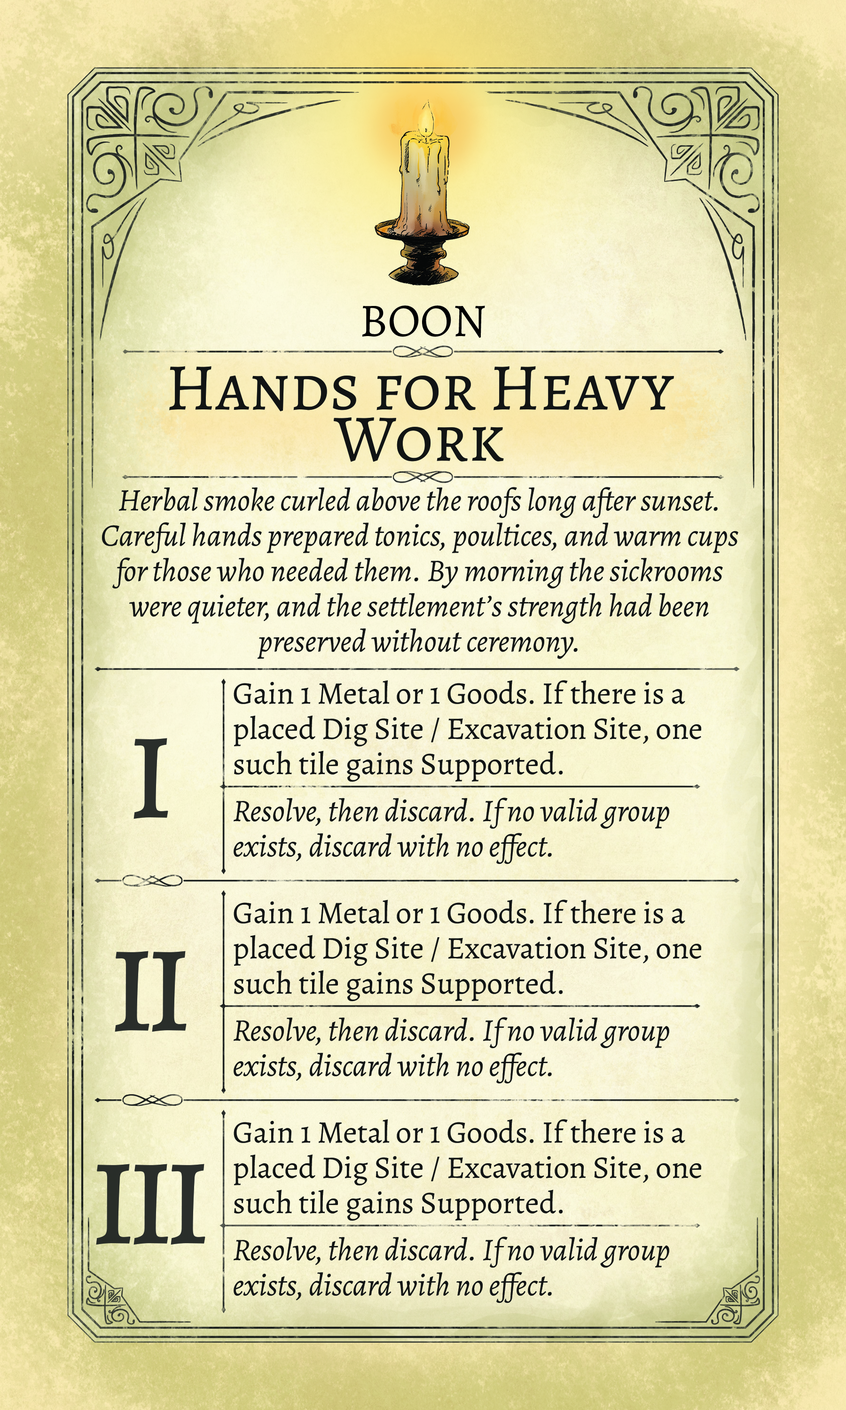
<style>
.page{position:relative;width:846px;height:1410px}
.page>*{position:absolute;margin:0}
.t1{font:47px "Alegreya-Regular";color:#000000;text-transform:uppercase}
.t2{font:66.6px "Alegreya-Regular";color:#000000;font-variant:small-caps}
.t3{font:31.3px/35.2px "Alegreya-Italic";color:#000000}
.t4{font:31.3px/35.2px "Alegreya-Regular";color:#000000}
.t5{font:156.6px "Alegreya-Regular";letter-spacing:-0.08em;color:#2a2e2b;font-variant:small-caps}
.t6{font:156.6px "Alegreya-Regular";letter-spacing:-0.08em;color:#2a2e2a;font-variant:small-caps}
.t7{font:156.6px "Alegreya-Regular";letter-spacing:-0.08em;color:#292d2a;font-variant:small-caps}
</style>
<div class="page">
<p class="t1" style="left:362px;top:305px;width:123px;height:33px">Boon</p>
<p class="t2" style="left:169px;top:366px;width:505px;height:96px">Hands for Heavy Work</p>
<p class="t3" style="left:102px;top:487px;width:636px;height:172px;text-align:center">Herbal smoke curled above the roofs long after sunset. Careful hands prepared tonics, poultices, and warm cups for those who needed them. By morning the sickrooms were quieter, and the settlement’s strength had been preserved without ceremony.</p>
<p class="t4" style="left:234px;top:680px;width:467px;height:102px">Gain 1 Metal or 1 Goods. If there is a placed Dig Site / Excavation Site, one such tile gains Supported.</p>
<p class="t5" style="left:133px;top:738px;width:35px;height:81px">i</p>
<p class="t3" style="left:233px;top:797px;width:436px;height:67px">Resolve, then discard. If no valid group exists, discard with no effect.</p>
<p class="t4" style="left:234px;top:899px;width:467px;height:102px">Gain 1 Metal or 1 Goods. If there is a placed Dig Site / Excavation Site, one such tile gains Supported.</p>
<p class="t6" style="left:115px;top:951px;width:72px;height:80px">ii</p>
<p class="t3" style="left:233px;top:1017px;width:436px;height:67px">Resolve, then discard. If no valid group exists, discard with no effect.</p>
<p class="t4" style="left:234px;top:1119px;width:467px;height:102px">Gain 1 Metal or 1 Goods. If there is a placed Dig Site / Excavation Site, one such tile gains Supported.</p>
<p class="t7" style="left:96px;top:1164px;width:109px;height:80px">iii</p>
<p class="t3" style="left:233px;top:1236px;width:436px;height:67px">Resolve, then discard. If no valid group exists, discard with no effect.</p>
</div>
